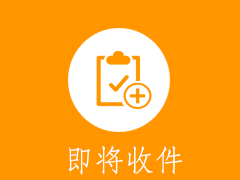
<style>
.page{position:relative;width:240px;height:180px;background:#ff9600}
.page>*{position:absolute;margin:0}
.t1{font:30px "STFangsong";color:#fdfdfc}
</style>
<div class="page">
<p class="t1" style="left:68px;top:145px;width:115px;height:30px">即将收件</p>
</div>
